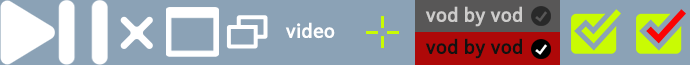
<style>
.page{position:relative;width:690px;height:65px;background:#8ba2b6}
.page>*{position:absolute;margin:0}
.t1{font:18px "NanumBarunGothicBold";letter-spacing:0.05em;color:#cdcccb}
.t2{font:18px "NanumBarunGothicBold";letter-spacing:0.05em;color:#ffffff}
.t3{font:18px "NanumBarunGothicBold";letter-spacing:0.05em;color:#121211}
</style>
<div class="page">
<p class="t1" style="left:425px;top:6px;width:97px;height:21px">vod by vod</p>
<p class="t2" style="left:285px;top:22px;width:50px;height:17px">video</p>
<p class="t3" style="left:425px;top:38px;width:97px;height:21px">vod by vod</p>
</div>
